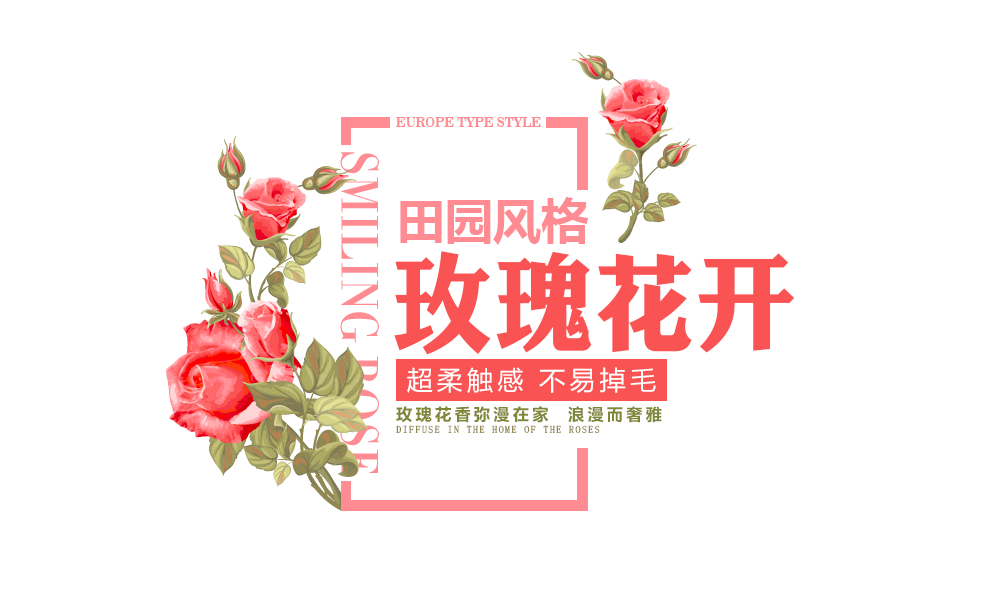
<style>
.page{position:relative;width:990px;height:600px;background:#ffffff}
.page>*{position:absolute;margin:0}
.t1{font:13.3px "News706BT-BoldC";color:#ff8c92;text-transform:uppercase;scale:0.93 1}
.t2{font:51.3px "MFLangSong_Noncommercial-Regular";color:#ff8c92;text-transform:uppercase}
.t3{font:48px "MicrosoftYaHei-Bold";color:#ff8c92}
.t4{font:109px "DFLiJinHeiW8";color:#f95453;scale:0.93 1}
.t5{font:26px "MicrosoftYaHei";letter-spacing:0.16em;color:#ffffff}
.t6{font:16.2px "MicrosoftYaHei-Bold";letter-spacing:0.2em;color:#7f8737}
.t7{font:10px "SimSun-ExtB";letter-spacing:0.14em;color:#908753;text-transform:uppercase}
</style>
<div class="page">
<p class="t1" style="left:396px;top:117px;width:145px;height:10px">Europe type style</p>
<p class="t2" style="left:340px;top:152px;width:39px;height:324px;rotate:90deg">Smiling Rose</p>
<p class="t3" style="left:400px;top:197px;width:189px;height:48px">田园风格</p>
<p class="t4" style="left:394px;top:251px;width:401px;height:104px">玫瑰花开</p>
<p class="t5" style="left:407px;top:367px;width:249px;height:26px">超柔触感 不易掉毛</p>
<p class="t6" style="left:396px;top:406px;width:266px;height:17px">玫瑰花香弥漫在家  浪漫而奢雅</p>
<p class="t7" style="left:396px;top:425px;width:204px;height:9px">Diffuse in the home of the roses</p>
</div>
